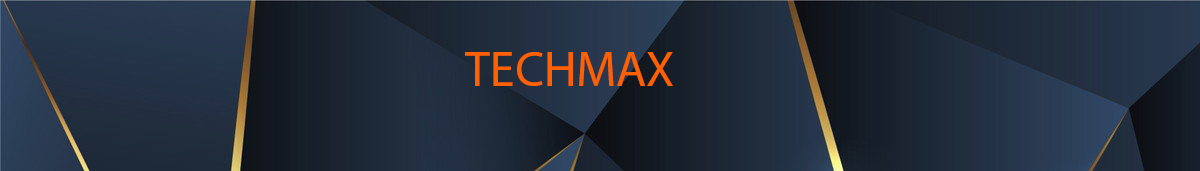
<style>
.page{position:relative;width:1200px;height:171px}
.page>*{position:absolute;margin:0}
.t1{font:50px "MyriadPro-Regular";color:#ff6000}
</style>
<div class="page">
<p class="t1" style="left:465px;top:52px;width:208px;height:34px">TECHMAX</p>
</div>
